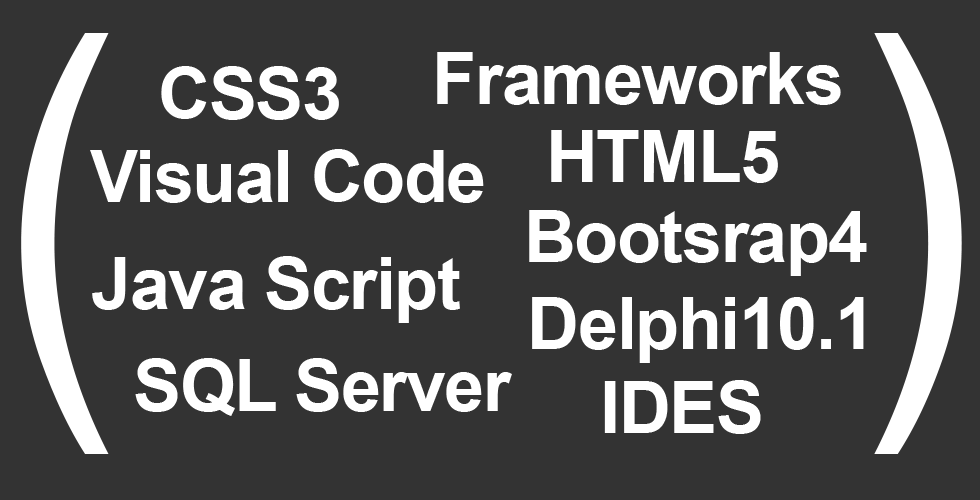
<style>
.page{position:relative;width:980px;height:500px;background:#333333}
.page>*{position:absolute;margin:0}
.t1{font:450px "ArialNarrow";letter-spacing:-0.02em;color:#ffffff}
.t2{font:72px "Arial-BoldMT";letter-spacing:-0.02em;color:#ffffff}
</style>
<div class="page">
<p class="t1" style="left:21px;top:33px;width:88px;height:421px">(</p>
<p class="t1" style="left:874px;top:33px;width:88px;height:421px">)</p>
<p class="t2" style="left:437px;top:52px;width:404px;height:53px">Frameworks</p>
<p class="t2" style="left:161px;top:66px;width:178px;height:54px">CSS3</p>
<p class="t2" style="left:551px;top:130px;width:227px;height:53px">HTML5</p>
<p class="t2" style="left:90px;top:149px;width:394px;height:54px">Visual Code</p>
<p class="t2" style="left:529px;top:210px;width:338px;height:66px">Bootsrap4</p>
<p class="t2" style="left:92px;top:256px;width:368px;height:67px">Java Script</p>
<p class="t2" style="left:532px;top:297px;width:332px;height:66px">Delphi10.1</p>
<p class="t2" style="left:135px;top:358px;width:377px;height:58px">SQL Server</p>
<p class="t2" style="left:604px;top:380px;width:157px;height:54px">IDES</p>
</div>
